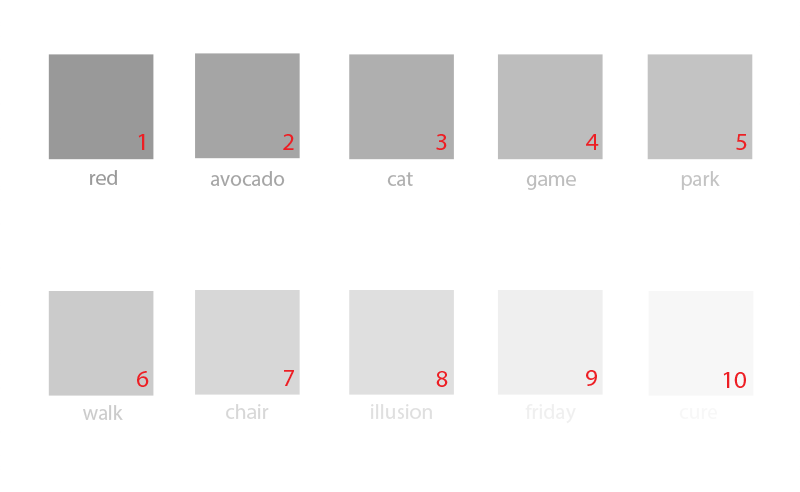
<style>
.page{position:relative;width:800px;height:492px;background:#ffffff}
.page>*{position:absolute;margin:0}
.t1{font:24.7px "MyriadPro-Regular";color:#ed1e24}
.t2{font:24.7px "MyriadPro-Regular";color:#ed2024}
.t3{font:21.2px "MyriadPro-Regular";color:#999999}
.t4{font:21.2px "MyriadPro-Regular";color:#a5a5a5}
.t5{font:21.2px "MyriadPro-Regular";color:#afafaf}
.t6{font:21.2px "MyriadPro-Regular";color:#c3c3c3}
.t7{font:21.2px "MyriadPro-Regular";color:#bdbdbd}
.t8{font:21.2px "MyriadPro-Regular";color:#cccccc}
</style>
<div class="page">
<p class="t1" style="left:138px;top:134px;width:7px;height:16px">1</p>
<p class="t1" style="left:283px;top:134px;width:11px;height:16px">2</p>
<p class="t1" style="left:436px;top:134px;width:11px;height:16px">3</p>
<p class="t1" style="left:586px;top:134px;width:13px;height:16px">4</p>
<p class="t2" style="left:736px;top:134px;width:11px;height:16px">5</p>
<p class="t3" style="left:90px;top:170px;width:27px;height:15px">red</p>
<p class="t4" style="left:210px;top:171px;width:75px;height:15px">avocado</p>
<p class="t5" style="left:387px;top:172px;width:26px;height:14px">cat</p>
<p class="t6" style="left:681px;top:171px;width:39px;height:19px">park</p>
<p class="t7" style="left:526px;top:175px;width:50px;height:15px">game</p>
<p class="t1" style="left:137px;top:371px;width:12px;height:16px">6</p>
<p class="t1" style="left:284px;top:370px;width:10px;height:16px">7</p>
<p class="t1" style="left:436px;top:371px;width:12px;height:16px">8</p>
<p class="t1" style="left:586px;top:370px;width:11px;height:16px">9</p>
<p class="t1" style="left:723px;top:372px;width:23px;height:16px">10</p>
<p class="t8" style="left:83px;top:405px;width:40px;height:15px">walk</p>
</div>
